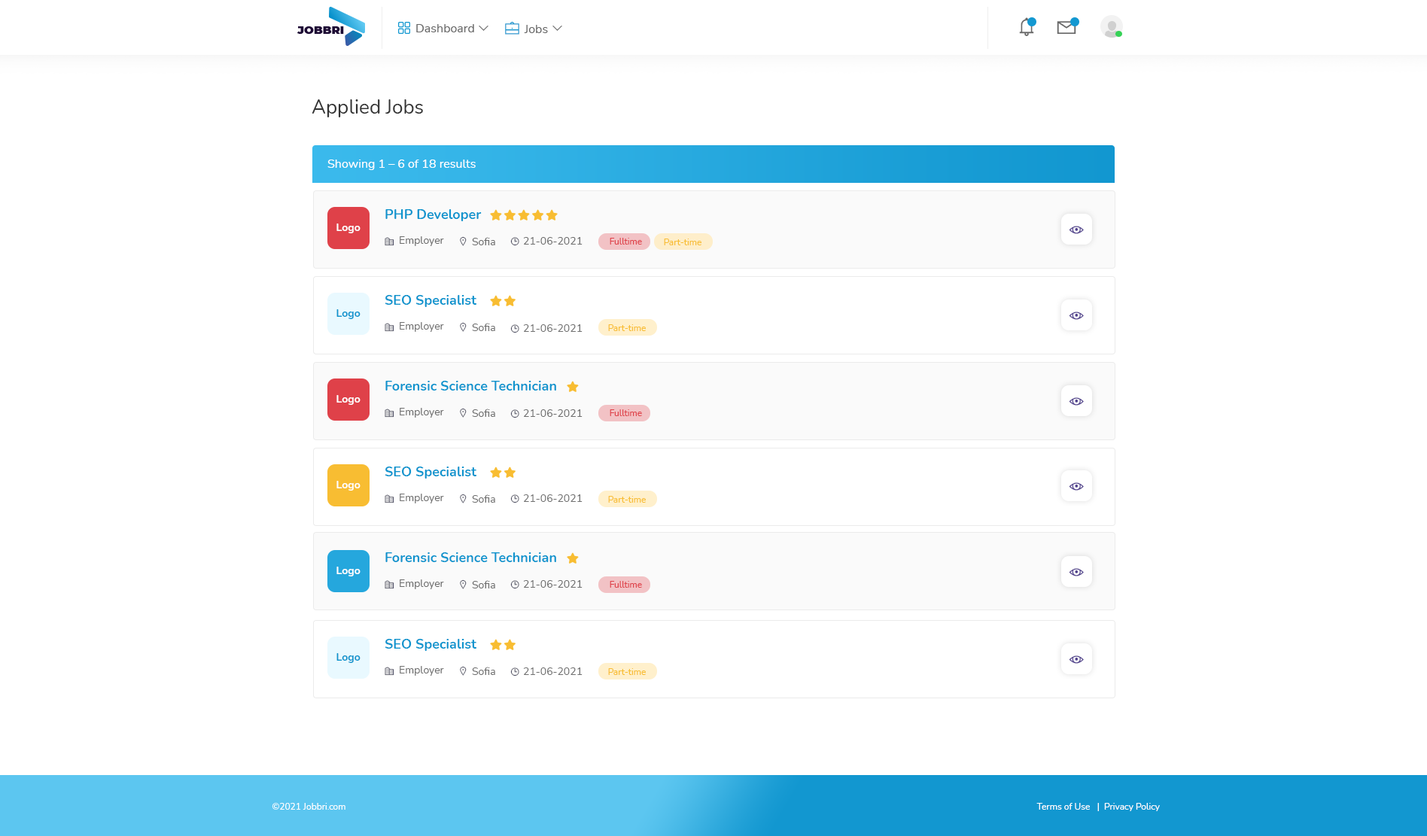
<style>
.page{position:relative;width:1427px;height:836px;background:#ffffff}
.page>*{position:absolute;margin:0}
.t1{font:12px "Nunito-Regular";color:#696969}
.t2{font:19.6px "Nunito-Regular";color:#333333}
.t3{font:12px "Nunito-Regular";color:#ffffff}
.t4{font:13.5px "Nunito-Bold";color:#0e95ce}
.t5{font:10.5px "Nunito-Bold";color:#ffffff}
.t6{font:10.5px "Nunito-Regular";color:#6e6e6e}
.t7{font:9px "Nunito-Regular";color:#df4149}
.t8{font:9px "Nunito-Regular";color:#f8bd32}
.t9{font:10.5px "Nunito-Bold";color:#0e95ce}
.t10{font:10.5px "Nunito-Regular";color:#707070}
.t11{font:9px "Nunito-Regular";color:#ffffff}
</style>
<div class="page">
<p class="t1" style="left:416px;top:24px;width:58px;height:8px">Dashboard</p>
<p class="t1" style="left:524px;top:25px;width:24px;height:8px">Jobs</p>
<p class="t2" style="left:311px;top:99px;width:112px;height:18px">Applied Jobs</p>
<p class="t3" style="left:327px;top:160px;width:149px;height:10px">Showing 1 – 6 of 18 results</p>
<p class="t4" style="left:385px;top:209px;width:97px;height:12px">PHP Developer</p>
<p class="t5" style="left:336px;top:223px;width:24px;height:10px">Logo</p>
<p class="t6" style="left:400px;top:236px;width:44px;height:10px">Employer</p>
<p class="t6" style="left:472px;top:237px;width:23px;height:8px">Sofia</p>
<p class="t6" style="left:523px;top:237px;width:59px;height:8px">21-06-2021</p>
<p class="t7" style="left:609px;top:238px;width:33px;height:7px">Fulltime</p>
<p class="t8" style="left:664px;top:239px;width:37px;height:6px">Part-time</p>
<p class="t4" style="left:384px;top:295px;width:92px;height:12px">SEO Specialist</p>
<p class="t9" style="left:336px;top:309px;width:24px;height:10px">Logo</p>
<p class="t10" style="left:400px;top:322px;width:44px;height:10px">Employer</p>
<p class="t10" style="left:472px;top:323px;width:23px;height:8px">Sofia</p>
<p class="t10" style="left:523px;top:324px;width:59px;height:8px">21-06-2021</p>
<p class="t8" style="left:608px;top:324px;width:38px;height:7px">Part-time</p>
<p class="t4" style="left:385px;top:381px;width:171px;height:9px">Forensic Science Technician</p>
<p class="t5" style="left:336px;top:395px;width:24px;height:10px">Logo</p>
<p class="t6" style="left:400px;top:408px;width:44px;height:10px">Employer</p>
<p class="t6" style="left:472px;top:409px;width:23px;height:8px">Sofia</p>
<p class="t6" style="left:523px;top:409px;width:59px;height:8px">21-06-2021</p>
<p class="t7" style="left:609px;top:409px;width:33px;height:7px">Fulltime</p>
<p class="t4" style="left:384px;top:466px;width:92px;height:13px">SEO Specialist</p>
<p class="t5" style="left:336px;top:481px;width:24px;height:10px">Logo</p>
<p class="t10" style="left:400px;top:494px;width:44px;height:9px">Employer</p>
<p class="t10" style="left:472px;top:494px;width:23px;height:9px">Sofia</p>
<p class="t10" style="left:523px;top:494px;width:59px;height:8px">21-06-2021</p>
<p class="t8" style="left:608px;top:496px;width:38px;height:7px">Part-time</p>
<p class="t4" style="left:385px;top:552px;width:171px;height:10px">Forensic Science Technician</p>
<p class="t5" style="left:336px;top:567px;width:24px;height:9px">Logo</p>
<p class="t6" style="left:400px;top:579px;width:44px;height:10px">Employer</p>
<p class="t6" style="left:472px;top:580px;width:23px;height:8px">Sofia</p>
<p class="t6" style="left:523px;top:580px;width:59px;height:8px">21-06-2021</p>
<p class="t7" style="left:609px;top:581px;width:33px;height:7px">Fulltime</p>
<p class="t4" style="left:384px;top:639px;width:92px;height:12px">SEO Specialist</p>
<p class="t9" style="left:336px;top:653px;width:24px;height:10px">Logo</p>
<p class="t10" style="left:400px;top:666px;width:44px;height:10px">Employer</p>
<p class="t10" style="left:472px;top:667px;width:23px;height:8px">Sofia</p>
<p class="t10" style="left:523px;top:667px;width:59px;height:8px">21-06-2021</p>
<p class="t8" style="left:608px;top:668px;width:38px;height:7px">Part-time</p>
<p class="t11" style="left:272px;top:803px;width:73px;height:7px">©2021 Jobbri.com</p>
<p class="t11" style="left:1036px;top:803px;width:123px;height:8px">Terms of Use   |  Privacy Policy</p>
</div>
